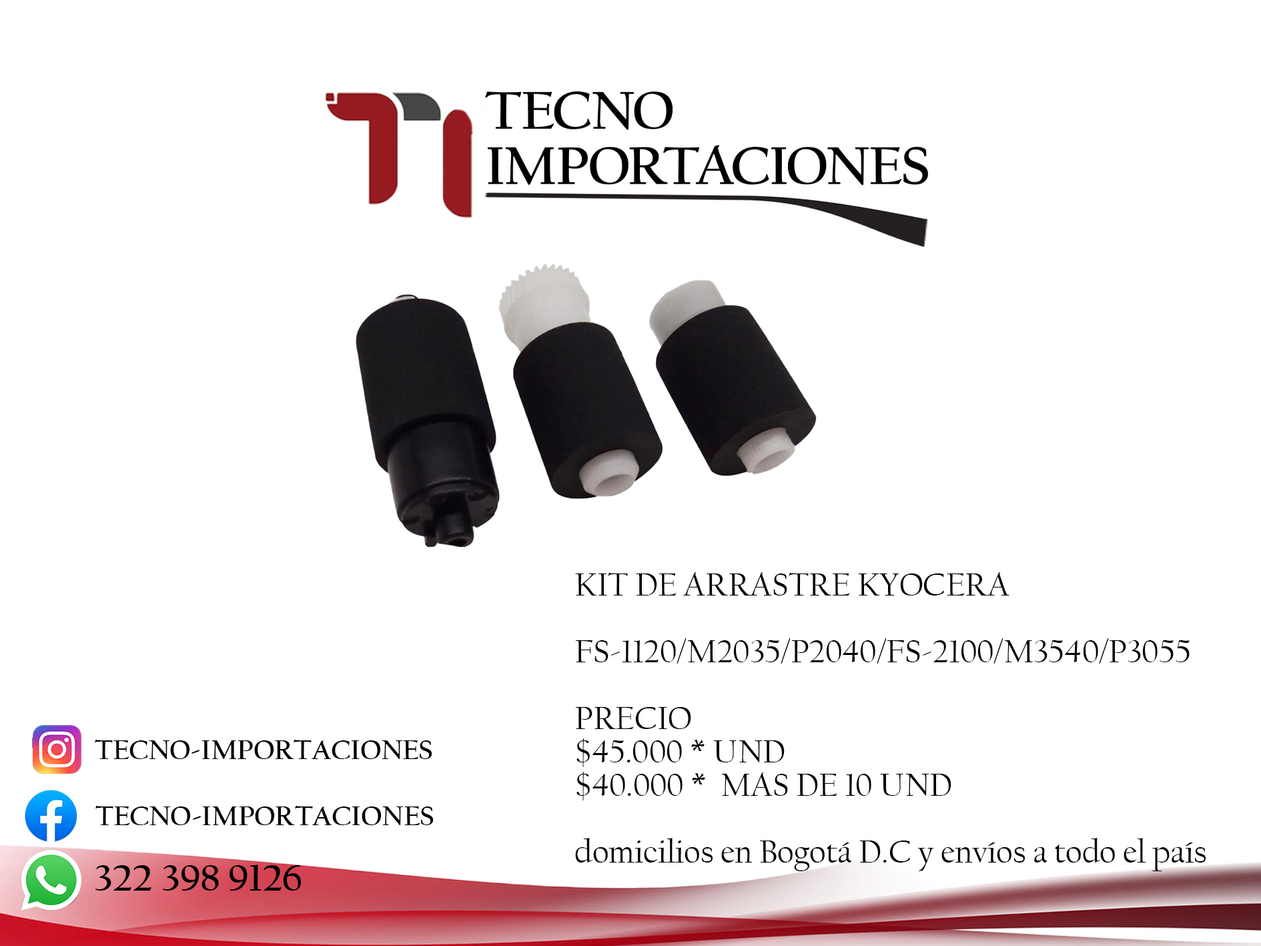
<style>
.page{position:relative;width:1261px;height:946px;background:#ffffff}
.page>*{position:absolute;margin:0}
.t1{font:33.4px/33.4px "CalifornianFB-Reg";letter-spacing:-0.005em;color:#000000}
.t2{font:27.8px "CalifornianFB-Bold";letter-spacing:-0.005em;color:#000000}
.t3{font:38.9px "CalifornianFB-Bold";letter-spacing:-0.005em;color:#000000}
</style>
<div class="page">
<p class="t1" style="left:575px;top:572px;width:631px;height:299px">KIT DE ARRASTRE KYOCERA<br><br>FS-1120/M2035/P2040/FS-2100/M3540/P3055<br><br>PRECIO<br>$45.000 * UND<br>$40.000 *  MAS DE 10 UND<br><br>domicilios en Bogotá D.C y envíos a todo el país</p>
<p class="t2" style="left:95px;top:739px;width:337px;height:20px">TECNO-IMPORTACIONES</p>
<p class="t2" style="left:95px;top:805px;width:339px;height:20px">TECNO-IMPORTACIONES</p>
<p class="t3" style="left:95px;top:864px;width:206px;height:26px">322 398 9126</p>
</div>
